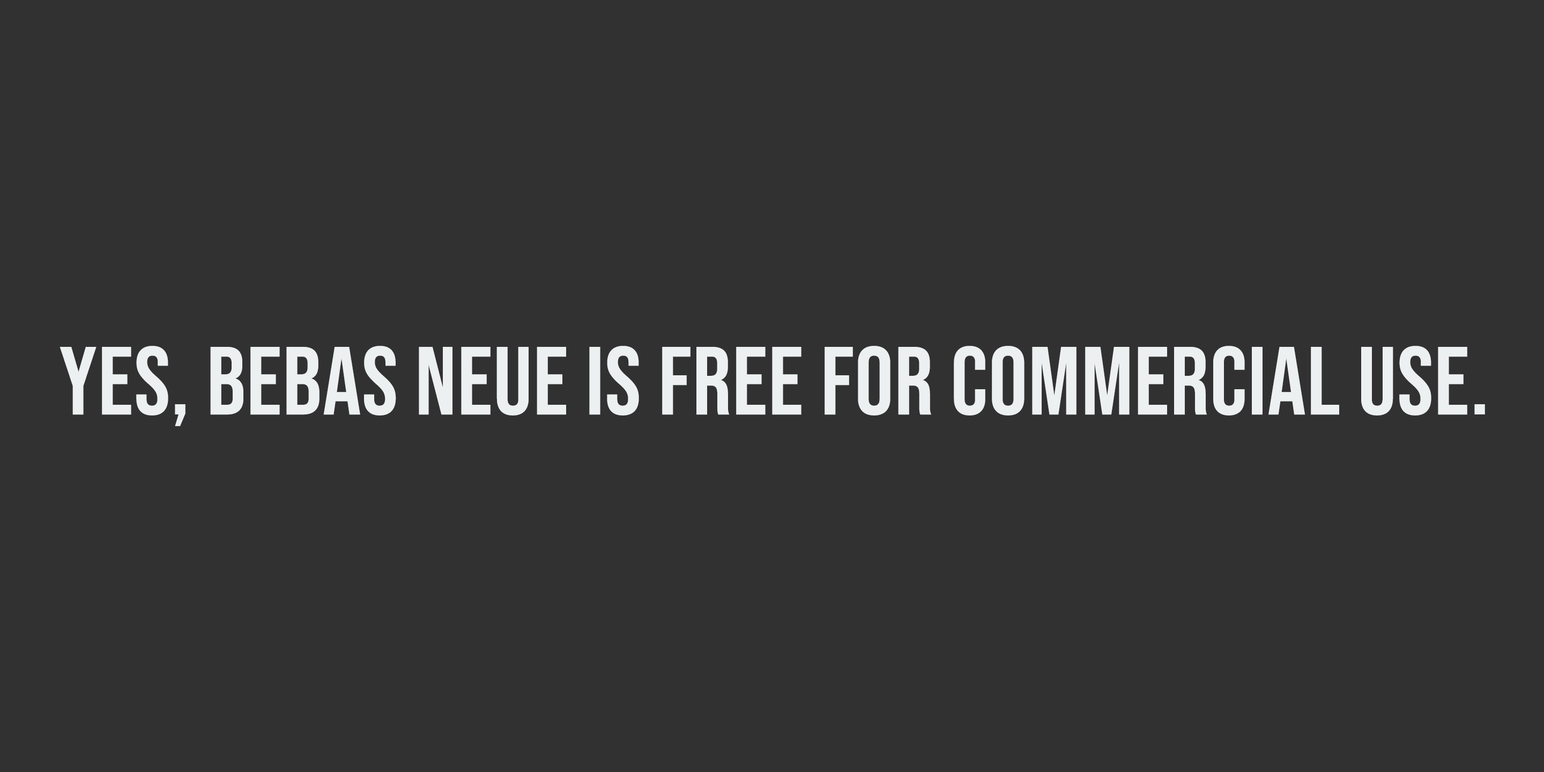
<style>
.page{position:relative;width:1544px;height:772px;background:#313131}
.page>*{position:absolute;margin:0}
.t1{font:96.5px "BebasNeue-Regular";letter-spacing:0.01em;color:#ecf0f1}
</style>
<div class="page">
<p class="t1" style="left:60px;top:346px;width:1425px;height:80px">Yes, Bebas neue is free for commercial use.</p>
</div>
